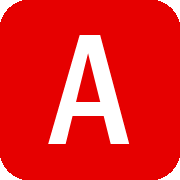
<style>
.page{position:relative;width:180px;height:180px;background:#e60000}
.page>*{position:absolute;margin:0}
.t1{font:162.5px "FranklinGothic-MediumCond";letter-spacing:0.075em;color:#ffffff}
</style>
<div class="page">
<p class="t1" style="left:48px;top:35px;width:82px;height:109px">A</p>
</div>
